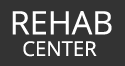
<style>
.page{position:relative;width:125px;height:66px;background:#333333}
.page>*{position:absolute;margin:0}
.t1{font:32.3px "OpenSans";color:#ffffff}
.t2{font:20.2px "OpenSans";color:#ffffff}
</style>
<div class="page">
<p class="t1" style="left:12px;top:11px;width:100px;height:24px">REHAB</p>
<p class="t2" style="left:23px;top:41px;width:74px;height:16px">CENTER</p>
</div>
